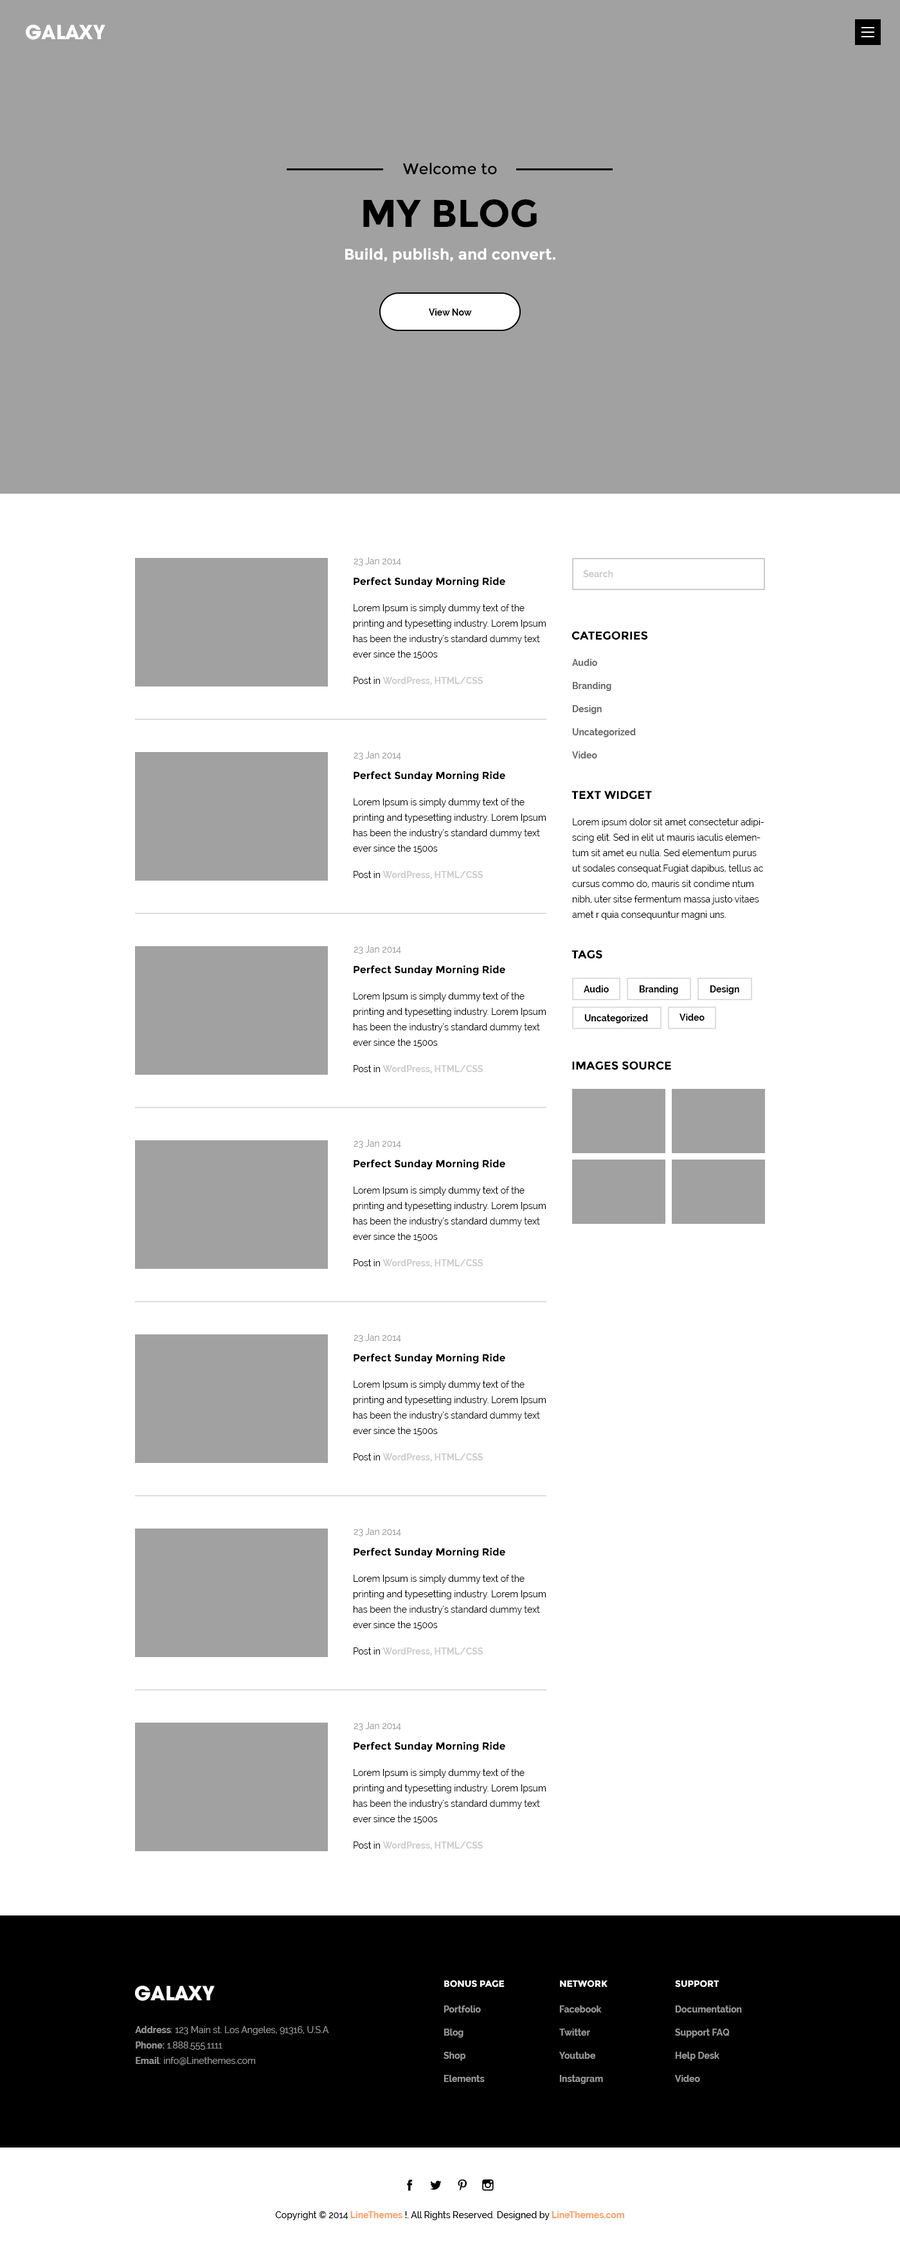
<style>
.page{position:relative;width:900px;height:2251px;background:#ffffff}
.page>*{position:absolute;margin:0}
.t1{font:19.3px "UTMAvoBold";color:#ffffff;text-transform:uppercase}
.t2{font:15.4px "Montserrat-Regular";color:#000000}
.t3{font:38.6px "Montserrat-Bold";color:#000000;text-transform:uppercase}
.t4{font:15.4px "Montserrat-Bold";color:#ffffff}
.t5{font:9px "Raleway-Bold";color:#000000}
.t6{font:9px "Raleway";color:#999999}
.t7{font:10.3px "Montserrat-Bold";color:#000000}
.t8{font:9px "Raleway-Bold";color:#cccccc}
.t9{font:9px/15.4px "Raleway";color:#000000}
.t10{font:11.6px "Montserrat-Bold";color:#000000;text-transform:uppercase}
.t11{font:9px/11.6px "Raleway-Bold";color:#666666}
.t12{font:9px "Raleway";color:#000000}
.t13{font:9px "Montserrat-Bold";color:#ffffff;text-transform:uppercase}
.t14{font:9px/11.6px "Raleway-Bold";color:#999999}
.t15{font:9px/15.4px "Raleway";color:#999999}
.t16{font:9px/15.4px "Raleway-Bold";color:#999999}
.t17{font:9px "Raleway-Medium";color:#000000}
.t18{font:9px "Raleway-Bold";color:#ff9e61}
</style>
<div class="page">
<p class="t1" style="left:26px;top:24px;width:79px;height:16px">Galaxy</p>
<p class="t2" style="left:402px;top:163px;width:95px;height:12px">Welcome to</p>
<p class="t3" style="left:363px;top:199px;width:174px;height:29px">my blog</p>
<p class="t4" style="left:345px;top:248px;width:210px;height:15px">Build, publish, and convert.</p>
<p class="t5" style="left:429px;top:309px;width:43px;height:7px">View Now</p>
<p class="t6" style="left:354px;top:557px;width:47px;height:9px">23 Jan 2014</p>
<p class="t7" style="left:354px;top:577px;width:151px;height:11px">Perfect Sunday Morning Ride</p>
<p class="t8" style="left:583px;top:570px;width:30px;height:7px">Search</p>
<p class="t9" style="left:353px;top:604px;width:193px;height:55px">Lorem Ipsum is simply dummy text of the printing and typesetting industry. Lorem Ipsum has been the industry's standard dummy text ever since the 1500s</p>
<p class="t10" style="left:572px;top:631px;width:76px;height:9px">Categories</p>
<p class="t11" style="left:572px;top:659px;width:64px;height:100px">Audio<br><br>Branding<br><br>Design<br><br>Uncategorized<br><br>Video</p>
<p class="t8" style="left:354px;top:677px;width:129px;height:8px"><span class="t12">Post in </span>WordPress, HTML/CSS</p>
<p class="t6" style="left:354px;top:752px;width:47px;height:8px">23 Jan 2014</p>
<p class="t7" style="left:354px;top:771px;width:151px;height:11px">Perfect Sunday Morning Ride</p>
<p class="t10" style="left:572px;top:791px;width:80px;height:9px">Text widget</p>
<p class="t9" style="left:353px;top:798px;width:193px;height:55px">Lorem Ipsum is simply dummy text of the printing and typesetting industry. Lorem Ipsum has been the industry's standard dummy text ever since the 1500s</p>
<p class="t9" style="left:572px;top:818px;width:192px;height:102px">Lorem ipsum dolor sit amet consectetur adipiscing elit. Sed in elit ut mauris iaculis elementum sit amet eu nulla. Sed elementum purus ut sodales consequat.Fugiat dapibus, tellus ac cursus commo do, mauris sit condime ntum nibh, uter sitse fermentum massa justo vitaes amet r quia consequuntur magni uns.</p>
<p class="t8" style="left:354px;top:871px;width:129px;height:8px"><span class="t12">Post in </span>WordPress, HTML/CSS</p>
<p class="t6" style="left:354px;top:946px;width:47px;height:8px">23 Jan 2014</p>
<p class="t10" style="left:572px;top:950px;width:30px;height:9px">tags</p>
<p class="t7" style="left:354px;top:966px;width:151px;height:10px">Perfect Sunday Morning Ride</p>
<p class="t5" style="left:584px;top:986px;width:25px;height:7px">Audio</p>
<p class="t5" style="left:639px;top:986px;width:39px;height:9px">Branding</p>
<p class="t5" style="left:710px;top:986px;width:29px;height:9px">Design</p>
<p class="t9" style="left:353px;top:993px;width:193px;height:54px">Lorem Ipsum is simply dummy text of the printing and typesetting industry. Lorem Ipsum has been the industry's standard dummy text ever since the 1500s</p>
<p class="t5" style="left:680px;top:1014px;width:25px;height:7px">Video</p>
<p class="t5" style="left:584px;top:1014px;width:64px;height:9px">Uncategorized</p>
<p class="t10" style="left:572px;top:1061px;width:99px;height:9px">Images Source</p>
<p class="t8" style="left:354px;top:1065px;width:129px;height:9px"><span class="t12">Post in </span>WordPress, HTML/CSS</p>
<p class="t6" style="left:354px;top:1140px;width:47px;height:8px">23 Jan 2014</p>
<p class="t7" style="left:354px;top:1160px;width:151px;height:10px">Perfect Sunday Morning Ride</p>
<p class="t9" style="left:353px;top:1187px;width:193px;height:54px">Lorem Ipsum is simply dummy text of the printing and typesetting industry. Lorem Ipsum has been the industry's standard dummy text ever since the 1500s</p>
<p class="t8" style="left:354px;top:1259px;width:129px;height:9px"><span class="t12">Post in </span>WordPress, HTML/CSS</p>
<p class="t6" style="left:354px;top:1334px;width:47px;height:8px">23 Jan 2014</p>
<p class="t7" style="left:354px;top:1354px;width:151px;height:10px">Perfect Sunday Morning Ride</p>
<p class="t9" style="left:353px;top:1381px;width:193px;height:55px">Lorem Ipsum is simply dummy text of the printing and typesetting industry. Lorem Ipsum has been the industry's standard dummy text ever since the 1500s</p>
<p class="t8" style="left:354px;top:1454px;width:129px;height:8px"><span class="t12">Post in </span>WordPress, HTML/CSS</p>
<p class="t6" style="left:354px;top:1528px;width:47px;height:8px">23 Jan 2014</p>
<p class="t7" style="left:354px;top:1548px;width:151px;height:10px">Perfect Sunday Morning Ride</p>
<p class="t9" style="left:353px;top:1575px;width:193px;height:55px">Lorem Ipsum is simply dummy text of the printing and typesetting industry. Lorem Ipsum has been the industry's standard dummy text ever since the 1500s</p>
<p class="t8" style="left:354px;top:1648px;width:129px;height:8px"><span class="t12">Post in </span>WordPress, HTML/CSS</p>
<p class="t6" style="left:354px;top:1722px;width:47px;height:9px">23 Jan 2014</p>
<p class="t7" style="left:354px;top:1742px;width:151px;height:10px">Perfect Sunday Morning Ride</p>
<p class="t9" style="left:353px;top:1769px;width:193px;height:55px">Lorem Ipsum is simply dummy text of the printing and typesetting industry. Lorem Ipsum has been the industry's standard dummy text ever since the 1500s</p>
<p class="t8" style="left:354px;top:1842px;width:129px;height:8px"><span class="t12">Post in </span>WordPress, HTML/CSS</p>
<p class="t1" style="left:135px;top:1986px;width:80px;height:15px">Galaxy</p>
<p class="t13" style="left:444px;top:1980px;width:61px;height:8px">Bonus Page</p>
<p class="t13" style="left:560px;top:1980px;width:48px;height:8px">Network</p>
<p class="t13" style="left:675px;top:1980px;width:44px;height:8px">Support</p>
<p class="t14" style="left:444px;top:2006px;width:41px;height:76px">Portfolio<br><br>Blog<br><br>Shop<br><br>Elements</p>
<p class="t14" style="left:559px;top:2006px;width:44px;height:78px">Facebook<br><br>Twitter<br><br>Youtube<br><br>Instagram</p>
<p class="t14" style="left:675px;top:2006px;width:67px;height:76px">Documentation<br><br>Support FAQ<br><br>Help Desk<br><br>Video</p>
<p class="t15" style="left:135px;top:2026px;width:194px;height:40px"><span class="t16">Address</span>: 123 Main st. Los Angeles, 91316, U.S.A<br><span class="t16">Phone:</span> 1.888.555.1111<br><span class="t16">Email</span>: info@Linethemes.com</p>
<p class="t17" style="left:275px;top:2211px;width:350px;height:9px">Copyright © 2014 <span class="t18">LineThemes </span>!. All Rights Reserved. Designed by <span class="t18">LineThemes.com</span></p>
</div>
